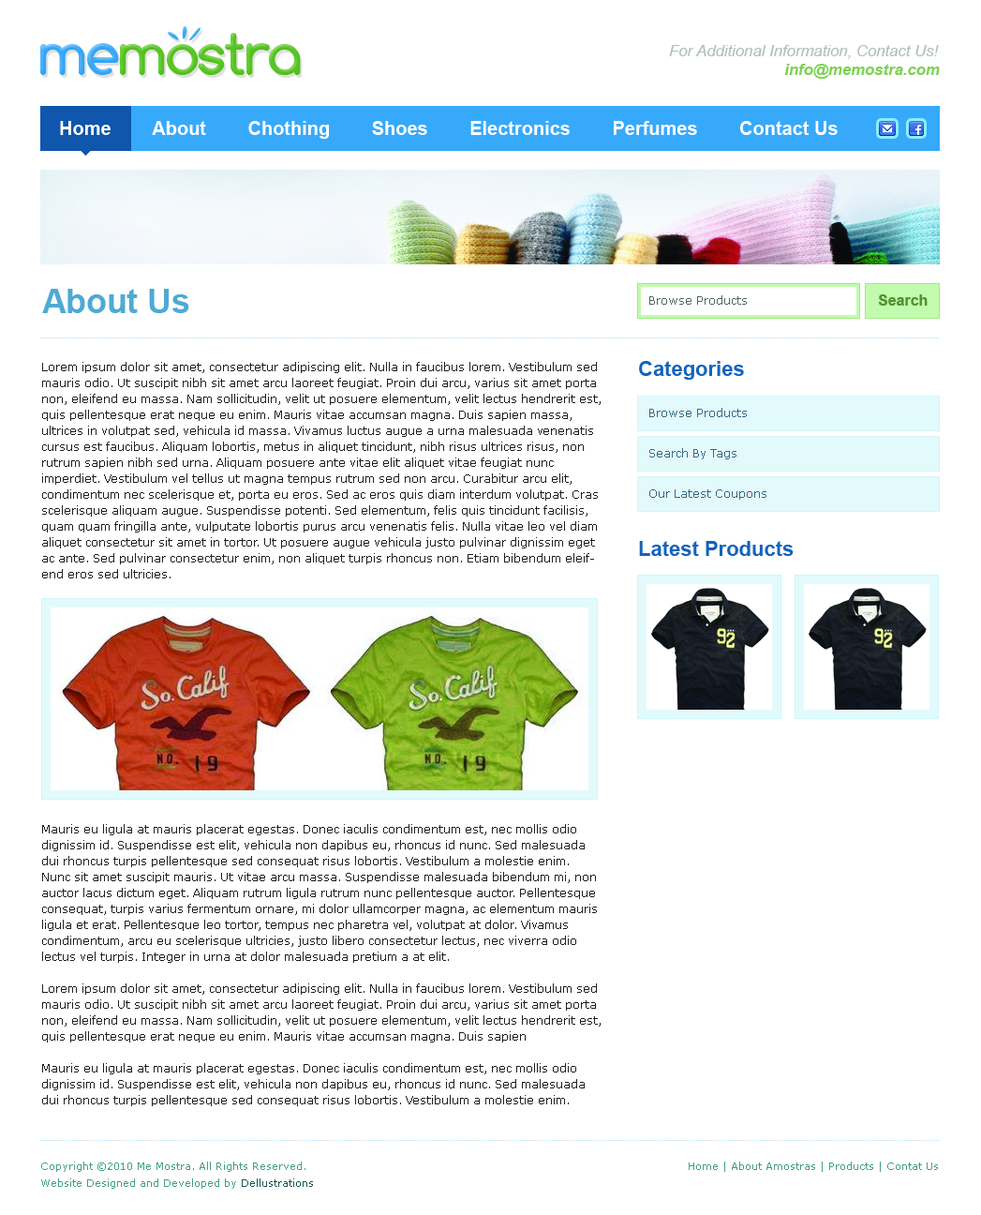
<style>
.page{position:relative;width:981px;height:1215px;background:#ffffff}
.page>*{position:absolute;margin:0}
.t1{font:59.2px "Comfortaa-Bold";letter-spacing:-0.02em;color:#57c621}
.t2{font:59.2px "Comfortaa-Bold";letter-spacing:-0.02em;color:#37a9fa}
.t3{font:15.7px "Arial-ItalicMT";color:#b0bcbc}
.t4{font:15.7px "Arial-BoldItalicMT";color:#7dd254}
.t5{font:18.7px "Arial-BoldMT";color:#ffffff}
.t6{font:33.3px "Arial-BoldMT";color:#4daad3}
.t7{font:11.2px "Verdana";color:#536566}
.t8{font:15px "Arial-BoldMT";color:#50922d}
.t9{font:11.2px/15.9px "Verdana";color:#1b2021}
.t10{font:20.6px "Arial-BoldMT";color:#1363bd}
.t11{font:11.2px "Verdana";color:#336988}
.t12{font:10.3px/16.9px "Verdana";color:#449f8c}
.t13{font:10.3px/16.9px "Verdana";color:#165852}
.t14{font:10.3px "Verdana";color:#449f8c}
</style>
<div class="page">
<p class="t1" style="left:40px;top:33px;width:261px;height:42px"><span class="t2">me</span>mostra</p>
<p class="t3" style="left:669px;top:45px;width:270px;height:14px">For Additional Information, Contact Us!</p>
<p class="t4" style="left:785px;top:64px;width:155px;height:15px">info@memostra.com</p>
<p class="t5" style="left:60px;top:121px;width:778px;height:18px">Home        About        Chothing        Shoes        Electronics        Perfumes        Contact Us</p>
<p class="t6" style="left:42px;top:289px;width:147px;height:24px">About Us</p>
<p class="t7" style="left:650px;top:295px;width:97px;height:10px">Browse Products</p>
<p class="t8" style="left:878px;top:294px;width:50px;height:12px">Search</p>
<p class="t9" style="left:42px;top:362px;width:559px;height:744px">Lorem ipsum dolor sit amet, consectetur adipiscing elit. Nulla in faucibus lorem. Vestibulum sed mauris odio. Ut suscipit nibh sit amet arcu laoreet feugiat. Proin dui arcu, varius sit amet porta non, eleifend eu massa. Nam sollicitudin, velit ut posuere elementum, velit lectus hendrerit est, quis pellentesque erat neque eu enim. Mauris vitae accumsan magna. Duis sapien massa, ultrices in volutpat sed, vehicula id massa. Vivamus luctus augue a urna malesuada venenatis cursus est faucibus. Aliquam lobortis, metus in aliquet tincidunt, nibh risus ultrices risus, non rutrum sapien nibh sed urna. Aliquam posuere ante vitae elit aliquet vitae feugiat nunc imperdiet. Vestibulum vel tellus ut magna tempus rutrum sed non arcu. Curabitur arcu elit, condimentum nec scelerisque et, porta eu eros. Sed ac eros quis diam interdum volutpat. Cras scelerisque aliquam augue. Suspendisse potenti. Sed elementum, felis quis tincidunt facilisis, quam quam fringilla ante, vulputate lobortis purus arcu venenatis felis. Nulla vitae leo vel diam aliquet consectetur sit amet in tortor. Ut posuere augue vehicula justo pulvinar dignissim eget ac ante. Sed pulvinar consectetur enim, non aliquet turpis rhoncus non. Etiam bibendum eleifend eros sed ultricies.<br><br><br><br><br><br><br><br><br><br><br><br><br><br><br><br>Mauris eu ligula at mauris placerat egestas. Donec iaculis condimentum est, nec mollis odio dignissim id. Suspendisse est elit, vehicula non dapibus eu, rhoncus id nunc. Sed malesuada dui rhoncus turpis pellentesque sed consequat risus lobortis. Vestibulum a molestie enim. Nunc sit amet suscipit mauris. Ut vitae arcu massa. Suspendisse malesuada bibendum mi, non auctor lacus dictum eget. Aliquam rutrum ligula rutrum nunc pellentesque auctor. Pellentesque consequat, turpis varius fermentum ornare, mi dolor ullamcorper magna, ac elementum mauris ligula et erat. Pellentesque leo tortor, tempus nec pharetra vel, volutpat at dolor. Vivamus condimentum, arcu eu scelerisque ultricies, justo libero consectetur lectus, nec viverra odio lectus vel turpis. Integer in urna at dolor malesuada pretium a at elit. <br><br>Lorem ipsum dolor sit amet, consectetur adipiscing elit. Nulla in faucibus lorem. Vestibulum sed mauris odio. Ut suscipit nibh sit amet arcu laoreet feugiat. Proin dui arcu, varius sit amet porta non, eleifend eu massa. Nam sollicitudin, velit ut posuere elementum, velit lectus hendrerit est, quis pellentesque erat neque eu enim. Mauris vitae accumsan magna. Duis sapien<br><br>Mauris eu ligula at mauris placerat egestas. Donec iaculis condimentum est, nec mollis odio dignissim id. Suspendisse est elit, vehicula non dapibus eu, rhoncus id nunc. Sed malesuada dui rhoncus turpis pellentesque sed consequat risus lobortis. Vestibulum a molestie enim.</p>
<p class="t10" style="left:639px;top:361px;width:105px;height:19px">Categories</p>
<p class="t11" style="left:650px;top:408px;width:97px;height:9px">Browse Products</p>
<p class="t11" style="left:650px;top:448px;width:87px;height:11px">Search By Tags</p>
<p class="t11" style="left:650px;top:489px;width:117px;height:11px">Our Latest Coupons</p>
<p class="t10" style="left:639px;top:541px;width:155px;height:15px">Latest Products</p>
<p class="t12" style="left:41px;top:1161px;width:272px;height:28px">Copyright ©2010 Me Mostra. All Rights Reserved.<br>Website Designed and Developed by <span class="t13">Dellustrations</span></p>
<p class="t14" style="left:689px;top:1161px;width:249px;height:11px">Home | About Amostras | Products | Contat Us</p>
</div>
